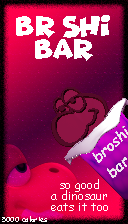
<style>
.page{position:relative;width:128px;height:224px}
.page>*{position:absolute;margin:0}
.t1{font:25.5px/23px "MerryChristmas2021";color:#ffffff}
.t2{font:12.4px/11.1px "ComicSansMS";color:#ffffff}
.t3{font:7.1px "ComicSansMS";color:#ffffff}
</style>
<div class="page">
<p class="t1" style="left:16px;top:15px;width:94px;height:46px;text-align:center">Br shi<br>bar</p>
<p class="t2" style="left:51px;top:179px;width:57px;height:32px;text-align:center">so good<br>a dinosaur<br>eats it too</p>
<p class="t3" style="left:2px;top:216px;width:45px;height:6px">5000 calories</p>
</div>
